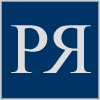
<style>
.page{position:relative;width:100px;height:100px;background:#003366}
.page>*{position:absolute;margin:0}
.t1{font:72px "TimesNewRomanPSMT";letter-spacing:0.05em;color:#dddddd}
</style>
<div class="page">
<p class="t1" style="left:11px;top:25px;width:37px;height:48px">P</p>
<p class="t1" style="left:43px;top:25px;width:48px;height:48px;rotate:180deg">R</p>
</div>
